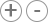
<style>
.page{position:relative;width:48px;height:22px;background:#ffffff}
.page>*{position:absolute;margin:0}
.t1{font:24px "Roboto-Regular";color:#757575}
</style>
<div class="page">
<p class="t1" style="left:4px;top:4px;width:13px;height:13px">+</p>
<p class="t1" style="left:34px;top:10px;width:7px;height:2px">-</p>
</div>
